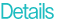
<style>
.page{position:relative;width:81px;height:21px;background:#ffffff}
.page>*{position:absolute;margin:0}
.t1{font:20px "GothicMB101Pro-Regular";letter-spacing:-0.06em;color:#1dbcc0;scale:0.9 1}
</style>
<div class="page">
<p class="t1" style="left:1px;top:3px;width:53px;height:16px">Details</p>
</div>
